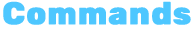
<style>
.page{position:relative;width:195px;height:30px;background:#ffffff}
.page>*{position:absolute;margin:0}
.t1{font:31.4px "Rubik-ExtraBold";letter-spacing:0.02em;color:#4ec7ff;font-weight:bold}
</style>
<div class="page">
<p class="t1" style="left:3px;top:1px;width:188px;height:24px">Commands</p>
</div>
